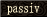
<style>
.page{position:relative;width:47px;height:17px}
.page>*{position:absolute;margin:0}
.t1{font:14.4px "MS-Mincho";color:#fff4ce;scale:0.75 1}
</style>
<div class="page">
<p class="t1" style="left:7px;top:2px;width:33px;height:13px">passiv</p>
</div>
